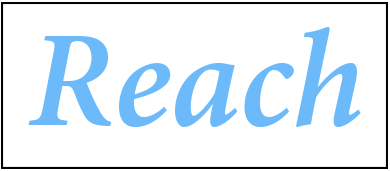
<style>
.page{position:relative;width:390px;height:171px;background:#ffffff}
.page>*{position:absolute;margin:0}
.t1{font:137.5px "MinionPro-SemiboldIt";color:#6cbafa}
</style>
<div class="page">
<p class="t1" style="left:28px;top:27px;width:333px;height:101px">Reach</p>
</div>
